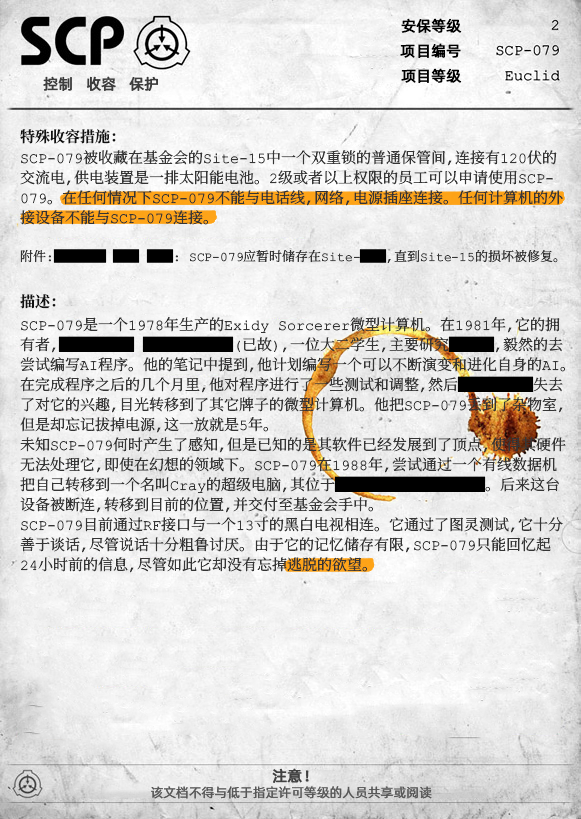
<style>
.page{position:relative;width:581px;height:819px}
.page>*{position:absolute;margin:0}
.t1{font:15px "AlibabaPuHuiTiR";color:#000000;font-weight:bold}
.t2{font:15px "AlibabaPuHuiTiR";color:#3d3d3d;font-weight:bold}
.t3{font:15px "ContainmentBreach-Bold";color:#121212}
.t4{font:15px/20px "ContainmentBreach-Regular";color:#353535}
.t5{font:13px/20px "ContainmentBreach-Regular";color:#353535}
.t6{font:13px/20px "ContainmentBreach-Regular";color:#000000}
.t7{font:15px/20px "ContainmentBreach-Regular";color:#000000}
.t8{font:15px "AlibabaPuHuiTiR";color:#414141;font-weight:bold}
.t9{font:13px "AlibabaPuHuiTiR";color:#575757}
</style>
<div class="page">
<p class="t1" style="left:401px;top:18px;width:61px;height:15px">安保等级</p>
<p class="t1" style="left:400px;top:43px;width:61px;height:15px">项目编号</p>
<p class="t2" style="left:43px;top:76px;width:115px;height:15px">控制   收容   保护</p>
<p class="t1" style="left:401px;top:68px;width:61px;height:15px">项目等级</p>
<p class="t3" style="left:20px;top:129px;width:96px;height:15px">特殊收容措施：</p>
<p class="t4" style="left:20px;top:150px;width:543px;height:113px">SCP-079被收藏在基金会的Site-15中一个双重锁的普通保管间，连接有120伏的<br>交流电，供电装置是一排太阳能电池。2级或者以上权限的员工可以申请使用SCP-<br>079。在任何情况下SCP-079不能与电话线，网络，电源插座连接。任何计算机的外<br>接设备不能与SCP-079连接。<br><br><span class="t5">附件：</span><span class="t6">████ ██ ██</span><span class="t5">： SCP-079应暂时储存在Site-</span><span class="t6">██</span><span class="t5">，直到Site-15的损坏被修复。</span></p>
<p class="t3" style="left:20px;top:294px;width:36px;height:15px">描述：</p>
<p class="t4" style="left:20px;top:317px;width:546px;height:256px">SCP-079是一个1978年生产的Exidy Sorcerer微型计算机。在1981年，它的拥<br>有者，<span class="t7">█████ ██████</span>（已故），一位大二学生，主要研究<span class="t7">███</span>，毅然的去<br>尝试编写AI程序。他的笔记中提到，他计划编写一个可以不断演变和进化自身的AI。<br>在完成程序之后的几个月里，他对程序进行了一些测试和调整，然后<span class="t7">█████</span>失去<br>了对它的兴趣，目光转移到了其它牌子的微型计算机。他把SCP-079丢到了杂物室，<br>但是却忘记拔掉电源，这一放就是5年。<br>未知SCP-079何时产生了感知，但是已知的是其软件已经发展到了顶点，使得其硬件<br>无法处理它，即使在幻想的领域下。SCP-079在1988年，尝试通过一个有线数据机<br>把自己转移到一个名叫Cray的超级电脑，其位于<span class="t7">██████████</span>。后来这台<br>设备被断连，转移到目前的位置，并交付至基金会手中。<br>SCP-079目前通过RF接口与一个13寸的黑白电视相连。它通过了图灵测试，它十分<br>善于谈话，尽管说话十分粗鲁讨厌。由于它的记忆储存有限，SCP-079只能回忆起<br>24小时前的信息，尽管如此它却没有忘掉逃脱的欲望。</p>
<p class="t8" style="left:272px;top:768px;width:37px;height:15px">注意！</p>
<p class="t9" style="left:151px;top:786px;width:281px;height:13px">该文档不得与低于指定许可等级的人员共享或阅读</p>
</div>
